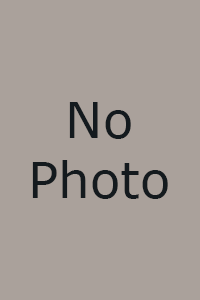
<style>
.page{position:relative;width:200px;height:300px;background:#aaa19b}
.page>*{position:absolute;margin:0}
.t1{font:50px "Verdana";color:#141a1e}
</style>
<div class="page">
<p class="t1" style="left:32px;top:102px;width:136px;height:97px;text-align:center">No<br>Photo</p>
</div>
